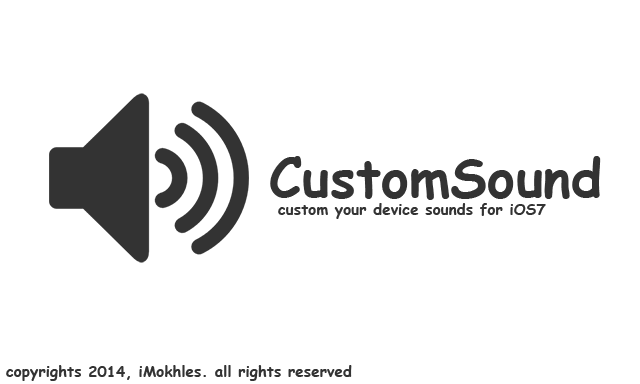
<style>
.page{position:relative;width:640px;height:384px;background:#ffffff}
.page>*{position:absolute;margin:0}
.t1{font:53.4px "ComicSansMS-Bold";color:#333333}
.t2{font:15.2px "ComicSansMS-Bold";color:#333333}
</style>
<div class="page">
<p class="t1" style="left:270px;top:156px;width:331px;height:44px">CustomSound</p>
<p class="t2" style="left:278px;top:203px;width:268px;height:16px">custom your device sounds for iOS7</p>
<p class="t2" style="left:6px;top:365px;width:346px;height:16px">copyrights 2014, iMokhles. all rights reserved</p>
</div>
